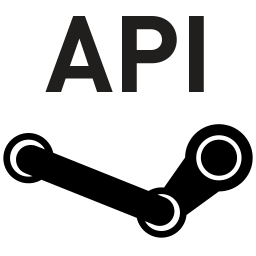
<style>
.page{position:relative;width:256px;height:256px;background:#ffffff}
.page>*{position:absolute;margin:0}
.t1{font:106.8px "DINPro-Bold";color:#201f1d;text-transform:uppercase}
</style>
<div class="page">
<p class="t1" style="left:45px;top:16px;width:159px;height:76px">api</p>
</div>
